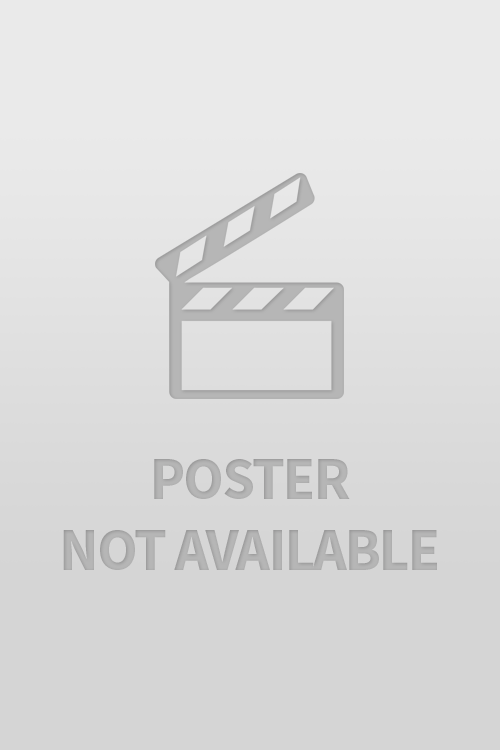
<style>
.page{position:relative;width:500px;height:750px;background:#d5d5d5}
.page>*{position:absolute;margin:0}
.t1{font:59.2px "SourceSansPro-Bold";letter-spacing:-0.03em;color:#b6b6b6}
</style>
<div class="page">
<p class="t1" style="left:63px;top:459px;width:374px;height:111px;text-align:center">POSTER<br>NOT AVAILABLE</p>
</div>
